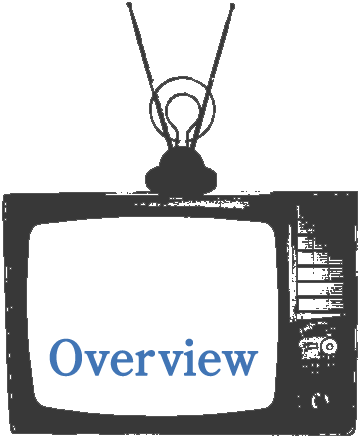
<style>
.page{position:relative;width:360px;height:438px;background:#ffffff}
.page>*{position:absolute;margin:0}
.t1{font:48px "CenturyOldStyleStd-Regular";color:#4175b5;font-weight:bold}
</style>
<div class="page">
<p class="t1" style="left:49px;top:338px;width:210px;height:39px">Overview</p>
</div>
